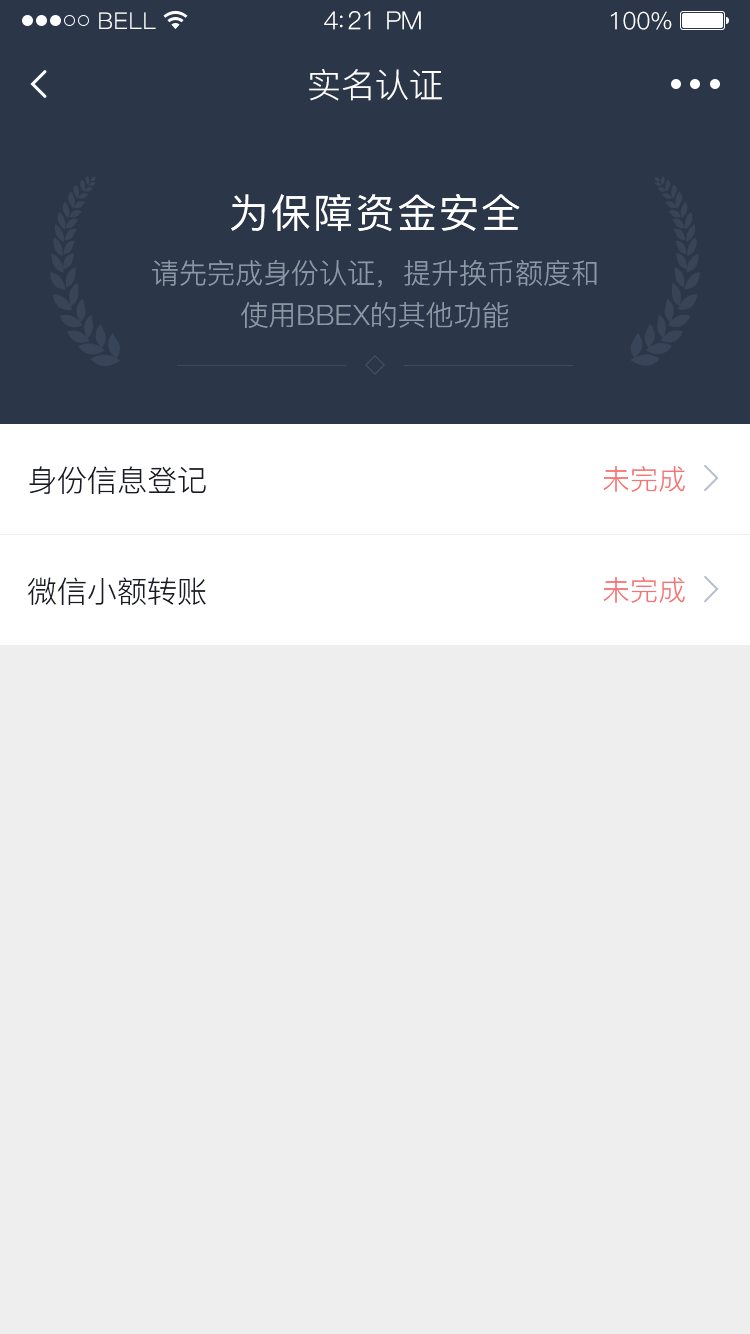
<style>
.page{position:relative;width:750px;height:1334px;background:#eeeeee}
.page>*{position:absolute;margin:0}
.t1{font:23px "PingFang-SC-Regular";letter-spacing:0.02em;color:#ffffff}
.t2{font:25px "PingFang-SC-Regular";letter-spacing:-0.02em;color:#ffffff}
.t3{font:24px "PingFang-SC-Regular";letter-spacing:-0.02em;color:#ffffff}
.t4{font:34px "PingFang-SC-Regular";color:#ffffff}
.t5{font:40px "PingFang-SC-Medium";letter-spacing:0.05em;color:#ffffff}
.t6{font:28px/42px "PingFang-SC-Regular";color:#8d98a7}
.t7{font:30px "PingFang-SC-Regular";color:#181b23}
.t8{font:28px "PingFang-SC-Regular";color:#f47574}
</style>
<div class="page">
<p class="t1" style="left:99px;top:12px;width:57px;height:17px">BELL</p>
<p class="t2" style="left:324px;top:11px;width:97px;height:19px">4:21 PM</p>
<p class="t3" style="left:611px;top:11px;width:61px;height:19px">100%</p>
<p class="t4" style="left:309px;top:69px;width:133px;height:32px">实名认证</p>
<p class="t5" style="left:231px;top:194px;width:289px;height:38px">为保障资金安全</p>
<p class="t6" style="left:152px;top:260px;width:445px;height:68px;text-align:center">请先完成身份认证，提升换币额度和<br>使用BBEX的其他功能</p>
<p class="t7" style="left:29px;top:466px;width:177px;height:28px">身份信息登记</p>
<p class="t8" style="left:603px;top:466px;width:82px;height:26px">未完成</p>
<p class="t7" style="left:28px;top:577px;width:178px;height:28px">微信小额转账</p>
<p class="t8" style="left:603px;top:577px;width:82px;height:26px">未完成</p>
</div>
